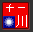
<style>
.page{position:relative;width:33px;height:32px;background:#f20000}
.page>*{position:absolute;margin:0}
.t1{font:10.4px "SimSun";color:#ffffff}
.t2{font:11.7px "SimSun";color:#ffffff}
</style>
<div class="page">
<p class="t1" style="left:6px;top:4px;width:19px;height:8px">十一</p>
<p class="t2" style="left:16px;top:15px;width:11px;height:12px">川</p>
</div>
